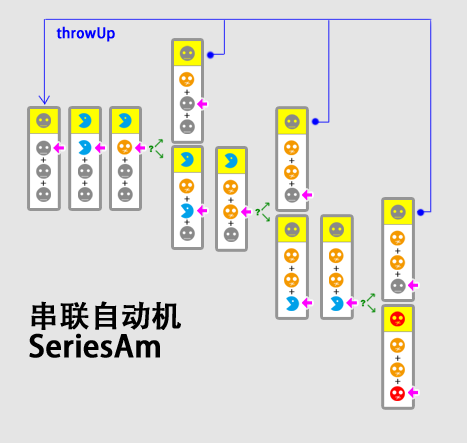
<style>
.page{position:relative;width:467px;height:443px;background:#e5e5e5}
.page>*{position:absolute;margin:0}
.t1{font:14px "AdobeHeitiStd-Regular";color:#0000ff;font-weight:bold}
.t2{font:30px/30px "AdobeHeitiStd-Regular";color:#000000;font-weight:bold}
</style>
<div class="page">
<p class="t1" style="left:56px;top:26px;width:59px;height:16px">throwUp</p>
<p class="t2" style="left:29px;top:301px;width:152px;height:57px">串联自动机<br>SeriesAm</p>
</div>
